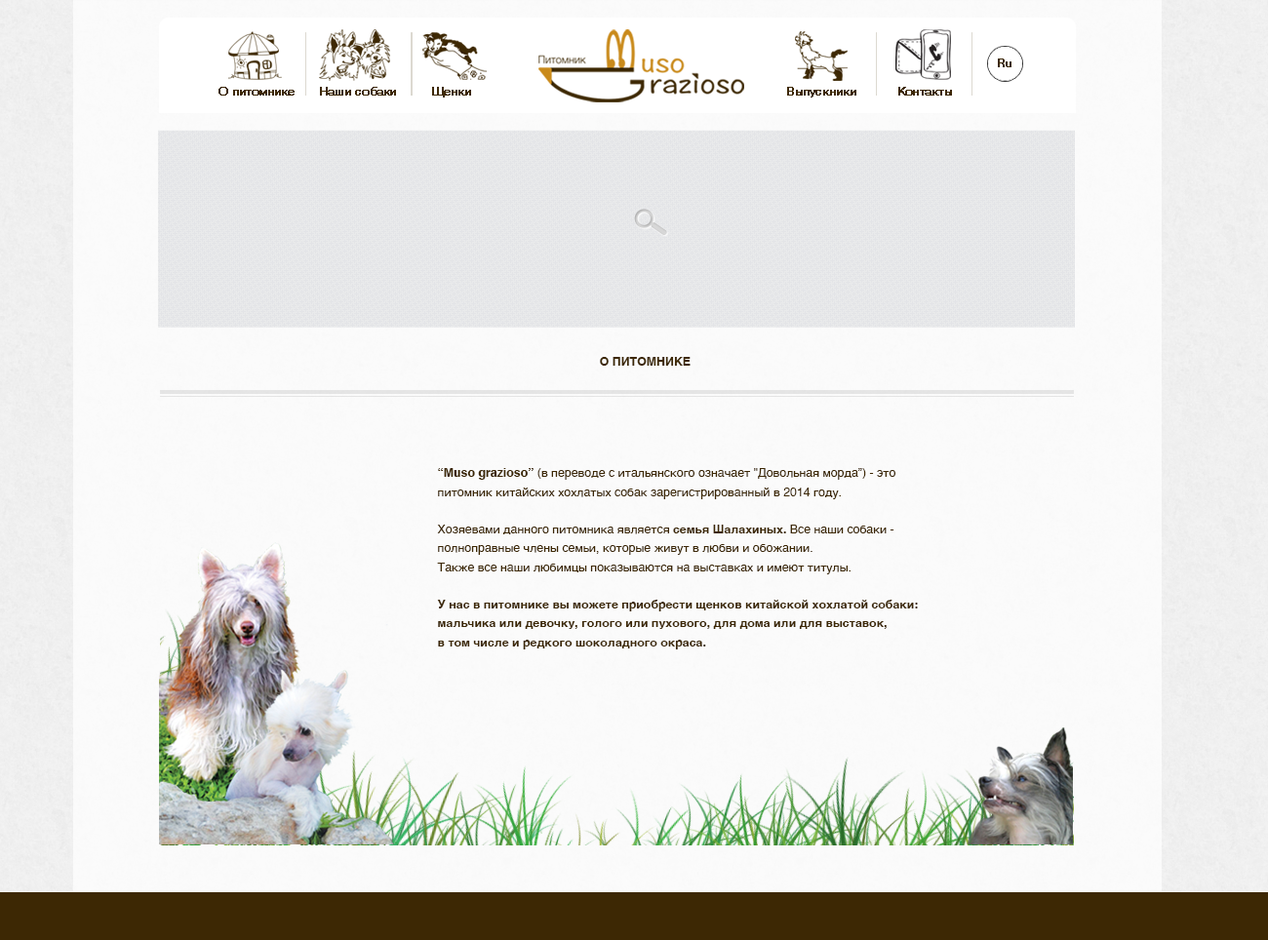
<style>
.page{position:relative;width:1268px;height:940px;background:#fbfbfb}
.page>*{position:absolute;margin:0}
.t1{font:11.8px "Helvetica-Light";letter-spacing:0.02em;color:#3d2804;font-weight:bold}
.t2{font:11.8px "Helvetica-Bold";color:#3d2804}
.t3{font:11.8px/18.8px "Helvetica-Bold";color:#3d2804}
.t4{font:11.8px/18.8px "Helvetica";color:#3d2804}
</style>
<div class="page">
<p class="t1" style="left:998px;top:59px;width:14px;height:8px">Ru</p>
<p class="t1" style="left:219px;top:87px;width:76px;height:9px">О питомнике</p>
<p class="t1" style="left:320px;top:87px;width:76px;height:9px">Наши собаки</p>
<p class="t1" style="left:432px;top:87px;width:39px;height:11px">Щенки</p>
<p class="t1" style="left:787px;top:87px;width:69px;height:11px">Выпускники</p>
<p class="t1" style="left:898px;top:87px;width:54px;height:9px">Контакты</p>
<p class="t2" style="left:600px;top:357px;width:91px;height:9px">О ПИТОМНИКЕ</p>
<p class="t3" style="left:437px;top:468px;width:481px;height:182px">“Muso grazioso” <span class="t4">(в переводе с итальянского означает "Довольная морда”) - это <br>питомник китайских хохлатых собак зарегистрированный в 2014 году.<br><br>Хозяевами данного питомника является </span>семья Шалахиных. <span class="t4">Все наши собаки - <br>полноправные члены семьи, которые живут в любви и обожании. <br>Также все наши любимцы показываются на выставках и имеют титулы.<br><br></span>У нас в питомнике вы можете приобрести щенков китайской хохлатой собаки: <br>мальчика или девочку, голого или пухового, для дома или для выставок, <br>в том числе и редкого шоколадного окраса.</p>
</div>
